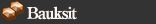
<style>
.page{position:relative;width:156px;height:24px;background:#333333}
.page>*{position:absolute;margin:0}
.t1{font:16px "RyuminPro-ExBold";letter-spacing:-0.08em;color:#fcf3ee}
</style>
<div class="page">
<p class="t1" style="left:27px;top:6px;width:50px;height:14px">Bauksit</p>
</div>
